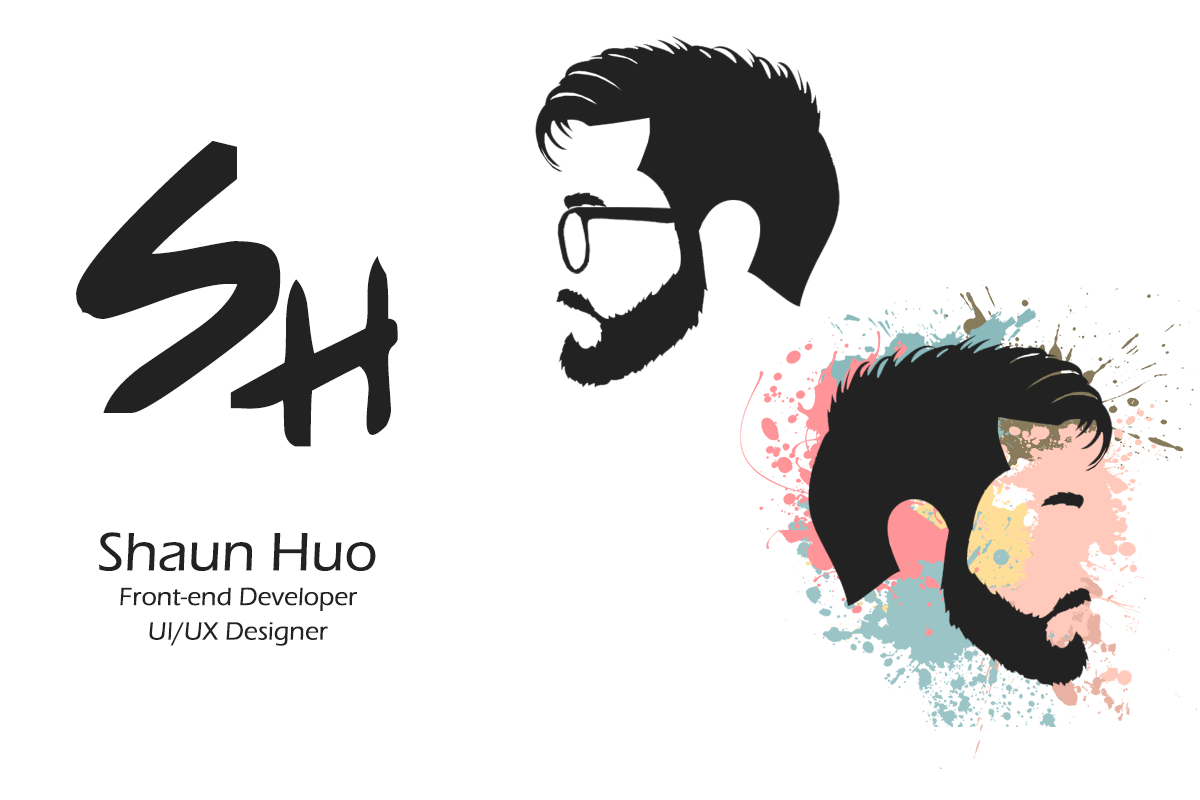
<style>
.page{position:relative;width:1200px;height:800px;background:#ffffff}
.page>*{position:absolute;margin:0}
.t1{font:345.3px "PPHandwritingNormal";letter-spacing:-0.025em;color:#222222;font-weight:bold}
.t2{font:25.8px/34.6px "ErasITC-Medium";letter-spacing:-0.025em;color:#222222;font-weight:bold}
.t3{font:56px/86.4px "ErasITC-Medium";letter-spacing:-0.025em;color:#222222;font-weight:bold}
</style>
<div class="page">
<p class="t1" style="left:76px;top:140px;width:205px;height:273px">S</p>
<p class="t1" style="left:230px;top:256px;width:168px;height:191px">h</p>
<p class="t2" style="left:99px;top:532px;width:277px;height:114px;text-align:center"><span class="t3">Shaun Huo<br></span>Front-end Developer<br>UI/UX Designer</p>
</div>
